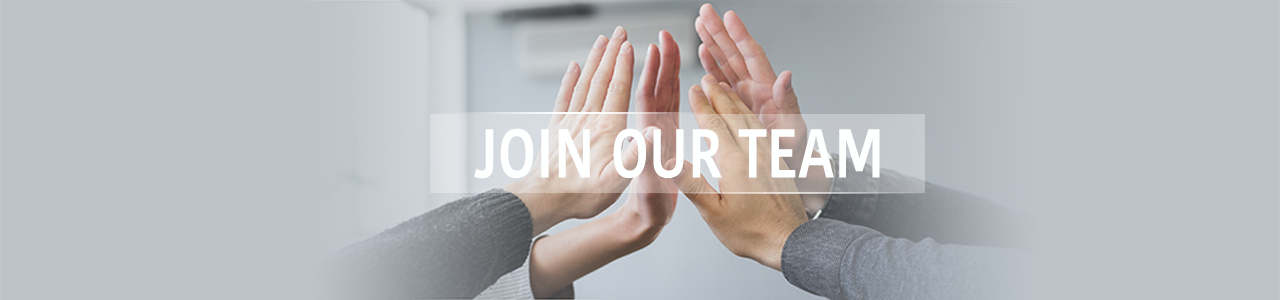
<style>
.page{position:relative;width:1280px;height:300px;background:#bcc3c9}
.page>*{position:absolute;margin:0}
.t1{font:68.2px "KohinoorBangla-Semibold";color:#feffff;scale:0.83 1}
</style>
<div class="page">
<p class="t1" style="left:474px;top:128px;width:406px;height:51px">JOIN OUR TEAM</p>
</div>
